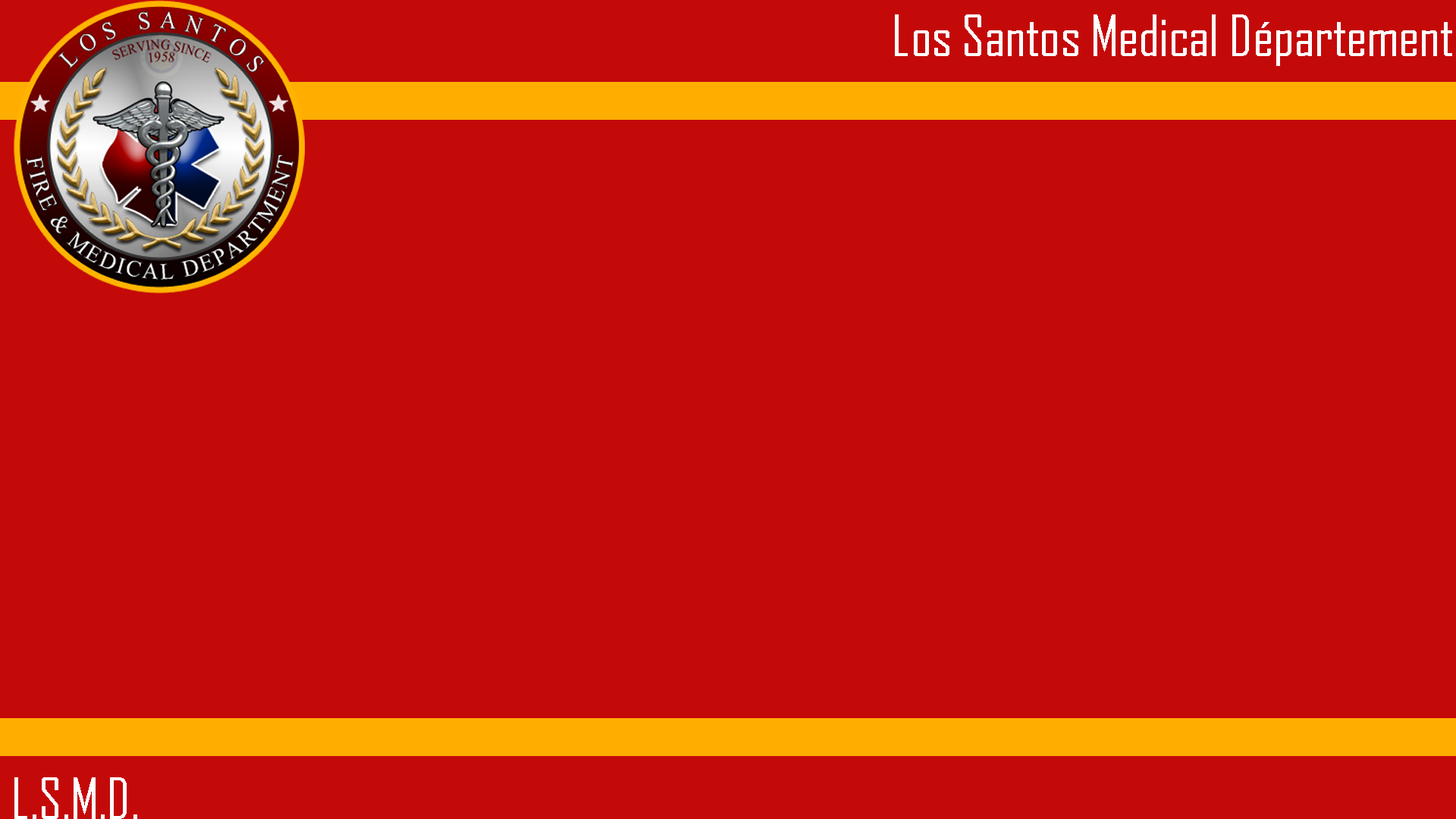
<style>
.page{position:relative;width:1456px;height:819px;background:#c40909}
.page>*{position:absolute;margin:0}
.t1{font:54.6px "AgencyFB-Reg";color:#ffffff}
</style>
<div class="page">
<p class="t1" style="left:895px;top:14px;width:557px;height:52px">Los Santos Medical Département</p>
<p class="t1" style="left:14px;top:777px;width:123px;height:42px">L.S.M.D.</p>
</div>
